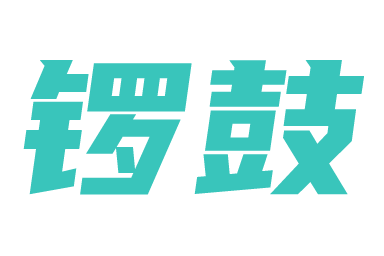
<style>
.page{position:relative;width:384px;height:256px;background:#ffffff}
.page>*{position:absolute;margin:0}
.t1{font:186.7px "YouSheBiaoTiHei";color:#39c5bb}
</style>
<div class="page">
<p class="t1" style="left:23px;top:60px;width:341px;height:135px">锣鼓</p>
</div>
